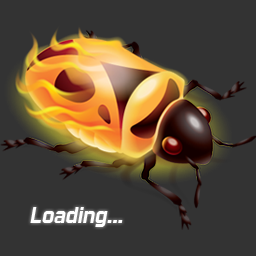
<style>
.page{position:relative;width:256px;height:256px;background:#333333}
.page>*{position:absolute;margin:0}
.t1{font:23px "GeForce-Bold-Alt";color:#ffffff;font-style:italic}
</style>
<div class="page">
<p class="t1" style="left:30px;top:207px;width:93px;height:20px">Loading...</p>
</div>
